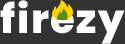
<style>
.page{position:relative;width:125px;height:44px;background:#333333}
.page>*{position:absolute;margin:0}
.t1{font:40px "Poppins-ExtraBold";letter-spacing:0.04em;color:#fefefe}
</style>
<div class="page">
<p class="t1" style="left:0px;top:0px;width:125px;height:44px">firezy</p>
</div>
